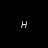
<style>
.page{position:relative;width:48px;height:48px;background:#000000}
.page>*{position:absolute;margin:0}
.t1{font:8.8px "AvantGardeLT-ExtraLightObl";color:#cdf8fd;text-transform:uppercase}
</style>
<div class="page">
<p class="t1" style="left:21px;top:21px;width:6px;height:7px">h</p>
</div>
